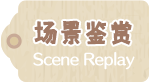
<style>
.page{position:relative;width:149px;height:82px}
.page>*{position:absolute;margin:0}
.t1{font:26.1px "shetumodengxiaofangti";color:#a07864;font-weight:bold;scale:0.94 1}
</style>
<div class="page">
<p class="t1" style="left:34px;top:20px;width:98px;height:25px">场景鉴赏</p>
</div>
